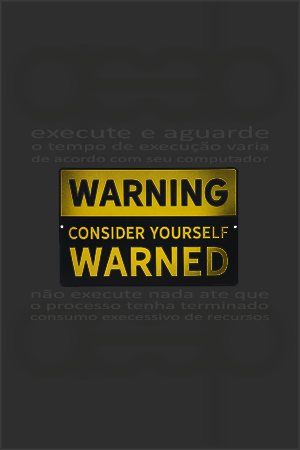
<style>
.page{position:relative;width:300px;height:450px;background:#2e2e2e}
.page>*{position:absolute;margin:0}
.t1{font:17.6px "Calibri";color:#3f3f3f;scale:1.84 1}
.t2{font:11.9px "Calibri";color:#3f3f3f;scale:1.84 1}
.t3{font:10px "Calibri";color:#3f3f3f;scale:1.84 1}
.t4{font:12.5px "Calibri";color:#3f3f3f;scale:1.84 1}
.t5{font:11.4px "Calibri";color:#3f3f3f;scale:1.84 1}
.t6{font:9.9px "Calibri";color:#3f3f3f;scale:1.84 1}
</style>
<div class="page">
<p class="t1" style="left:31px;top:126px;width:238px;height:15px">execute e aguarde</p>
<p class="t2" style="left:31px;top:141px;width:238px;height:12px">o tempo de execução varia</p>
<p class="t3" style="left:31px;top:155px;width:238px;height:9px">de acordo com seu computador</p>
<p class="t4" style="left:31px;top:289px;width:238px;height:12px">não execute nada ate que</p>
<p class="t5" style="left:30px;top:301px;width:238px;height:11px">o processo tenha terminado</p>
<p class="t6" style="left:30px;top:313px;width:239px;height:8px">consumo execessivo de recursos</p>
</div>
